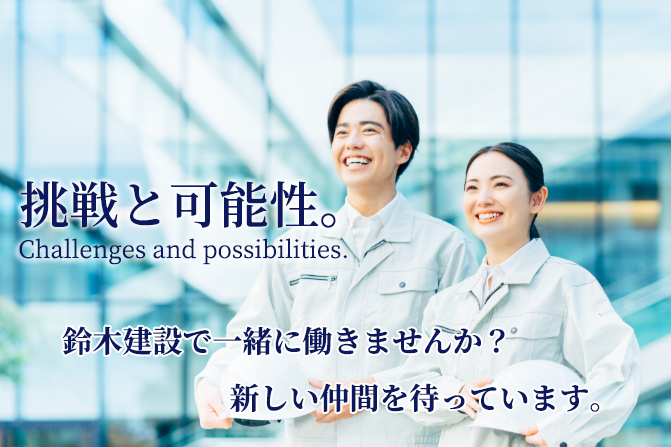
<style>
.page{position:relative;width:671px;height:447px}
.page>*{position:absolute;margin:0}
.t1{font:50px "NotoSerifJP-SemiBold";color:#0b185d}
.t2{font:24px "NotoSerifJP-Regular";color:#0b185d}
.t3{font:24px "MPLUS1p-Light";color:#0b185d}
.t4{font:30px "NotoSerifJP-Bold";color:#0b185d}
</style>
<div class="page">
<p class="t1" style="left:20px;top:181px;width:316px;height:47px">挑戦と可能性。</p>
<p class="t2" style="left:19px;top:238px;width:328px;height:27px"><span class="t3"> <br></span>Challenges and possibilities.</p>
<p class="t4" style="left:62px;top:326px;width:443px;height:29px">鈴木建設で一緒に働きませんか？</p>
<p class="t4" style="left:230px;top:383px;width:177px;height:29px">新しい仲間を</p>
<p class="t4" style="left:410px;top:383px;width:190px;height:29px">待っています。</p>
</div>
